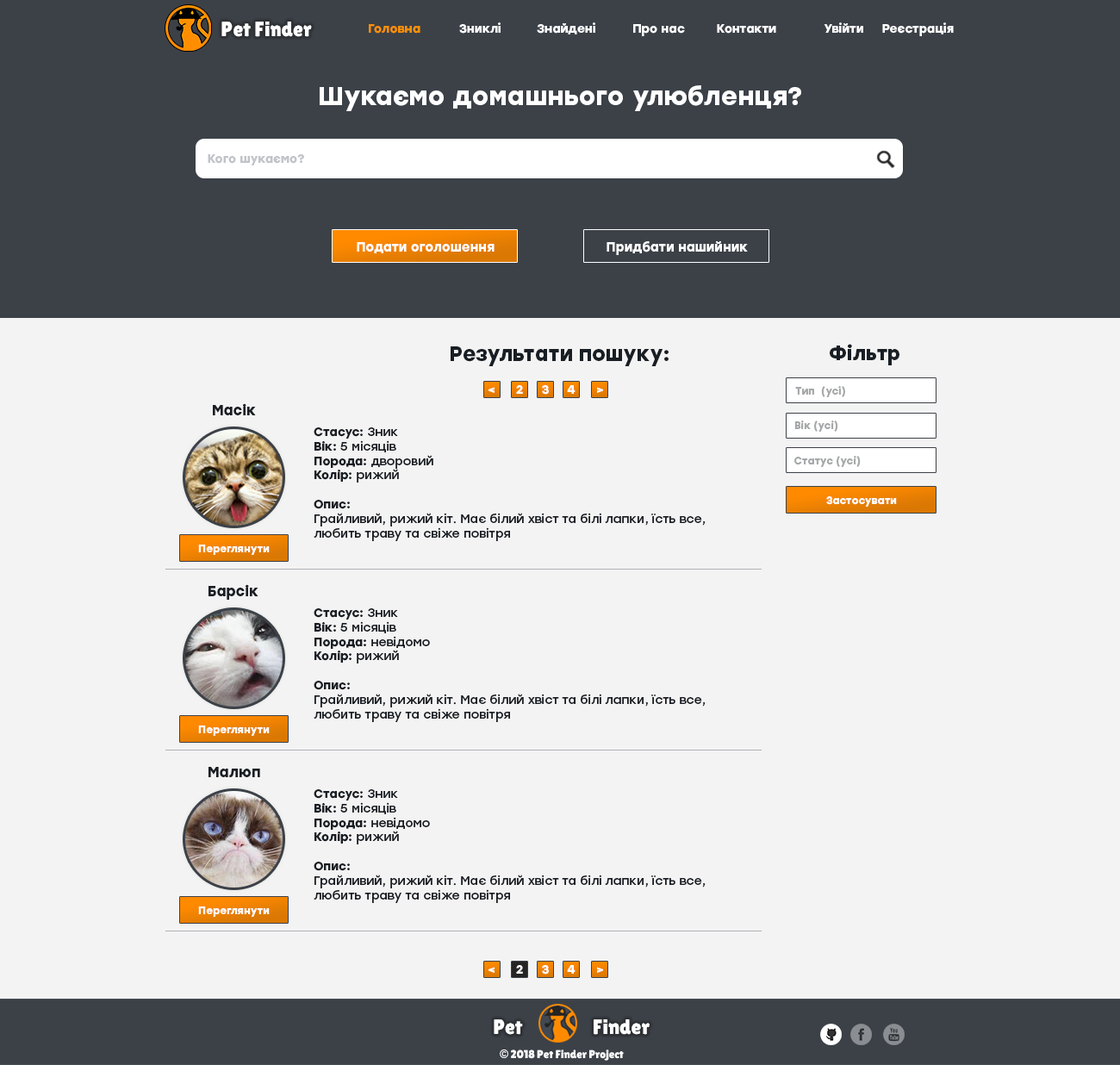
<style>
.page{position:relative;width:1120px;height:1065px;background:#f4f3f3}
.page>*{position:absolute;margin:0}
.t1{font:20.7px "LilitaOne";color:#ffffff}
.t2{font:12.2px "Stolzl-Bold";color:#ff9001}
.t3{font:12.2px "Stolzl-Bold";color:#ffffff}
.t4{font:25.8px "Stolzl-Bold";color:#ffffff}
.t5{font:12.1px "Stolzl-Bold";color:#c0c4c9}
.t6{font:12.9px "Stolzl-Bold";color:#ffffff}
.t7{font:20.7px "Stolzl-Bold";color:#181e24}
.t8{font:19.9px "Stolzl-Bold";color:#181e24}
.t9{font:12.1px "Stolzl-Bold";color:#ffffff}
.t10{font:10.3px "Stolzl-Bold";color:#a6a8a9}
.t11{font:14.4px "Stolzl-Bold";color:#181e24}
.t12{font:12px "Stolzl-Regular";color:#181e24}
.t13{font:12px "Stolzl-Bold";color:#181e24}
.t14{font:10.4px "Stolzl-Bold";color:#ffffff}
.t15{font:11.4px "LilitaOne";color:#ffffff}
.t16{font:11.4px "GillSans-UltraBold";color:#ffffff}
</style>
<div class="page">
<p class="t1" style="left:221px;top:22px;width:91px;height:15px">Pet Finder</p>
<p class="t2" style="left:369px;top:24px;width:51px;height:10px">Головна</p>
<p class="t3" style="left:459px;top:22px;width:42px;height:12px">Зниклі</p>
<p class="t3" style="left:537px;top:22px;width:58px;height:12px">Знайдені</p>
<p class="t3" style="left:633px;top:24px;width:52px;height:12px">Про нас</p>
<p class="t3" style="left:717px;top:24px;width:59px;height:10px">Контакти</p>
<p class="t3" style="left:824px;top:22px;width:39px;height:11px">Увійти</p>
<p class="t3" style="left:882px;top:22px;width:72px;height:14px">Реєстрація</p>
<p class="t4" style="left:320px;top:85px;width:481px;height:26px">Шукаємо домашнього улюбленця?</p>
<p class="t5" style="left:208px;top:154px;width:96px;height:11px">Кого шукаємо?</p>
<p class="t6" style="left:357px;top:242px;width:137px;height:11px">Подати оголошення</p>
<p class="t6" style="left:606px;top:241px;width:142px;height:14px">Придбати нашийник</p>
<p class="t7" style="left:451px;top:346px;width:217px;height:20px">Результати пошуку:</p>
<p class="t8" style="left:830px;top:344px;width:69px;height:21px">Фільтр</p>
<p class="t9" style="left:488px;top:387px;width:6px;height:6px;rotate:180deg">&gt;</p>
<p class="t9" style="left:516px;top:385px;width:7px;height:9px">2</p>
<p class="t9" style="left:542px;top:385px;width:7px;height:10px">3</p>
<p class="t9" style="left:567px;top:385px;width:8px;height:9px">4</p>
<p class="t9" style="left:597px;top:387px;width:6px;height:6px">&gt;</p>
<p class="t10" style="left:795px;top:386px;width:50px;height:11px">Тип  (усі)</p>
<p class="t11" style="left:213px;top:403px;width:43px;height:12px">Масік</p>
<p class="t10" style="left:794px;top:420px;width:44px;height:12px">Вік (усі)</p>
<p class="t12" style="left:314px;top:427px;width:392px;height:114px"><span class="t13">Стасус: </span>Зник<br><span class="t13">Вік: </span>5 місяців<br><span class="t13">Порода: </span>дворовий<br><span class="t13">Колір: </span>рижий<br><span class="t13"><br>Опис: <br></span>Грайливий, рижий кіт. Має білий хвіст та білі лапки, їсть все,<br>любить траву та свіже повітря</p>
<p class="t10" style="left:794px;top:456px;width:67px;height:11px">Статус (усі)</p>
<p class="t14" style="left:826px;top:496px;width:71px;height:11px">Застосувати</p>
<p class="t14" style="left:198px;top:544px;width:72px;height:11px">Переглянути</p>
<p class="t11" style="left:208px;top:584px;width:50px;height:16px">Барсік</p>
<p class="t12" style="left:314px;top:608px;width:392px;height:114px"><span class="t13">Стасус: </span>Зник<br><span class="t13">Вік: </span>5 місяців<br><span class="t13">Порода: </span>невідомо<br><span class="t13">Колір: </span>рижий<br><span class="t13"><br>Опис: <br></span>Грайливий, рижий кіт. Має білий хвіст та білі лапки, їсть все,<br>любить траву та свіже повітря</p>
<p class="t14" style="left:198px;top:725px;width:72px;height:11px">Переглянути</p>
<p class="t11" style="left:208px;top:767px;width:52px;height:10px">Малюп</p>
<p class="t12" style="left:314px;top:789px;width:392px;height:114px"><span class="t13">Стасус: </span>Зник<br><span class="t13">Вік: </span>5 місяців<br><span class="t13">Порода: </span>невідомо<br><span class="t13">Колір: </span>рижий<br><span class="t13"><br>Опис: <br></span>Грайливий, рижий кіт. Має білий хвіст та білі лапки, їсть все,<br>любить траву та свіже повітря</p>
<p class="t14" style="left:198px;top:906px;width:72px;height:11px">Переглянути</p>
<p class="t9" style="left:516px;top:965px;width:7px;height:8px">2</p>
<p class="t9" style="left:542px;top:965px;width:7px;height:9px">3</p>
<p class="t9" style="left:567px;top:965px;width:8px;height:8px">4</p>
<p class="t9" style="left:488px;top:967px;width:6px;height:6px;rotate:180deg">&gt;</p>
<p class="t9" style="left:597px;top:967px;width:6px;height:6px">&gt;</p>
<p class="t1" style="left:494px;top:1019px;width:29px;height:16px">Pet</p>
<p class="t1" style="left:594px;top:1019px;width:56px;height:16px">Finder</p>
<p class="t15" style="left:500px;top:1049px;width:124px;height:11px"><span class="t16">©</span> 2018 Pet Finder Project</p>
</div>
